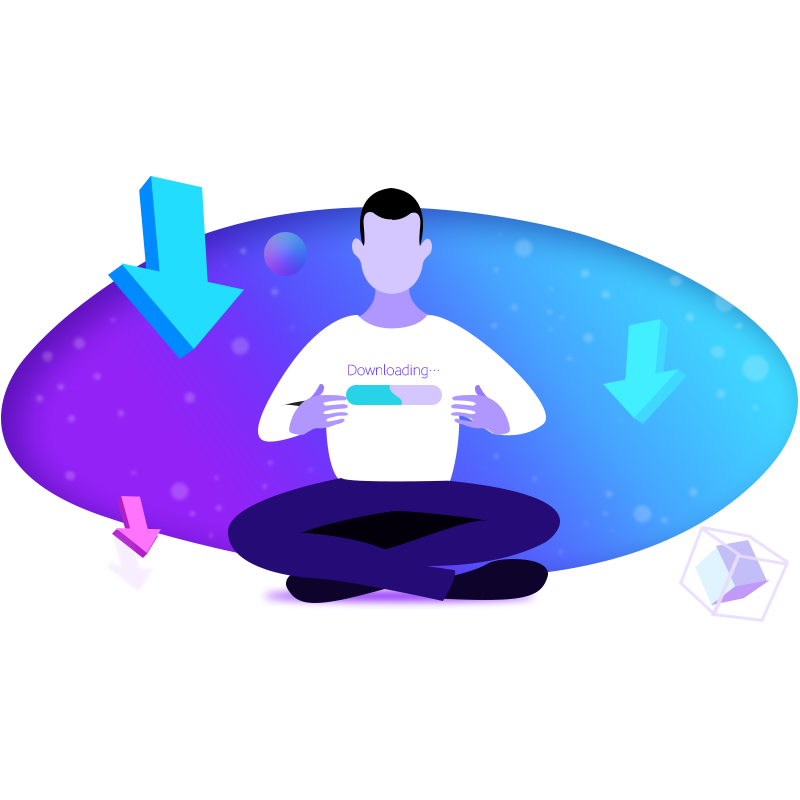
<style>
.page{position:relative;width:800px;height:800px;background:#ffffff}
.page>*{position:absolute;margin:0}
.t1{font:14.2px "HuaweiSansThin";color:#7545ff}
</style>
<div class="page">
<p class="t1" style="left:348px;top:364px;width:91px;height:15px">Downloading···</p>
</div>
